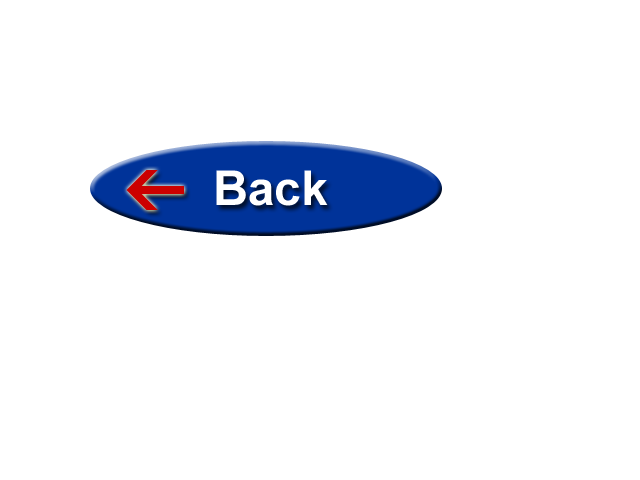
<style>
.page{position:relative;width:640px;height:480px;background:#ffffff}
.page>*{position:absolute;margin:0}
.t1{font:48px "Arial-BoldMT";color:#ffffff}
</style>
<div class="page">
<p class="t1" style="left:216px;top:170px;width:112px;height:36px">Back</p>
</div>
